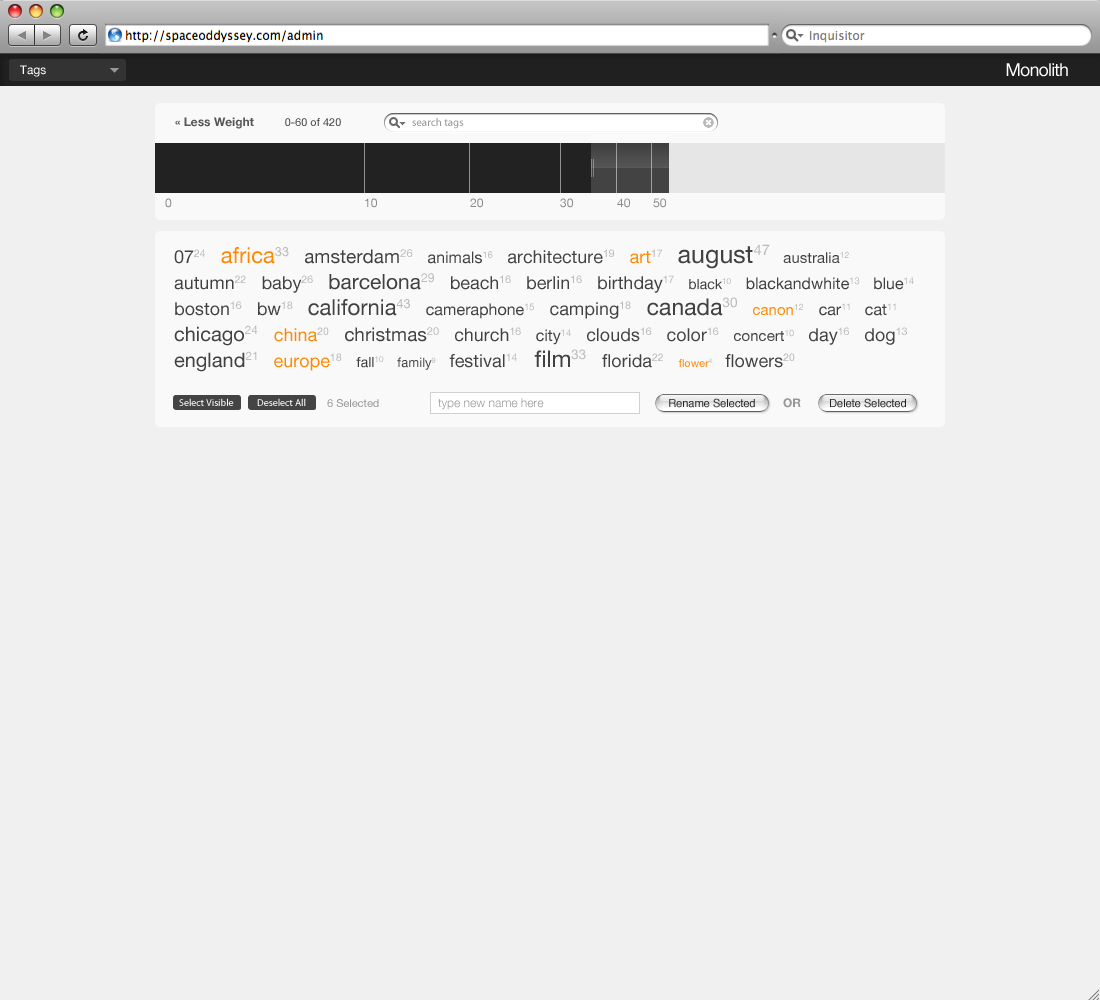
<style>
.page{position:relative;width:1100px;height:1000px;background:#f0f0f0}
.page>*{position:absolute;margin:0}
.t1{font:12px "HelveticaNeue";color:#ffffff}
.t2{font:18px "HelveticaNeue";letter-spacing:-0.05em;color:#ffffff}
.t3{font:12px "HelveticaNeue-Bold";color:#444444}
.t4{font:11px "HelveticaNeue";color:#444444}
.t5{font:11px "MyriadPro-Regular";color:#949494}
.t6{font:12px "HelveticaNeue";color:#898989}
.t7{font:16px/26px "HelveticaNeue";color:#414141}
.t8{font:18px/26px "HelveticaNeue";color:#414141}
.t9{font:18px/26px "HelveticaNeue";color:#bbbbbb}
.t10{font:22px/26px "HelveticaNeue";color:#ff8800}
.t11{font:22px/26px "HelveticaNeue";color:#bbbbbb}
.t12{font:19px/26px "HelveticaNeue";color:#414141}
.t13{font:19px/26px "HelveticaNeue";color:#bbbbbb}
.t14{font:16px/26px "HelveticaNeue";color:#bbbbbb}
.t15{font:18px/26px "HelveticaNeue";color:#ff8800}
.t16{font:25px/26px "HelveticaNeue";color:#414141}
.t17{font:25px/26px "HelveticaNeue";color:#bbbbbb}
.t18{font:15px/26px "HelveticaNeue";color:#414141}
.t19{font:15px/26px "HelveticaNeue";color:#bbbbbb}
.t20{font:21px/26px "HelveticaNeue";color:#414141}
.t21{font:21px/26px "HelveticaNeue";color:#bbbbbb}
.t22{font:14px/26px "HelveticaNeue";color:#414141}
.t23{font:14px/26px "HelveticaNeue";color:#bbbbbb}
.t24{font:22px/26px "HelveticaNeue";color:#414141}
.t25{font:22px/26px "HelveticaNeue";color:#b8b8b8}
.t26{font:23px/26px "HelveticaNeue";color:#414141}
.t27{font:23px/26px "HelveticaNeue";color:#bbbbbb}
.t28{font:15px/26px "HelveticaNeue";color:#ff8800}
.t29{font:20px/26px "HelveticaNeue";color:#414141}
.t30{font:20px/26px "HelveticaNeue";color:#bbbbbb}
.t31{font:13px/26px "HelveticaNeue";color:#414141}
.t32{font:13px/26px "HelveticaNeue";color:#bbbbbb}
.t33{font:11px/26px "HelveticaNeue";color:#ff8800}
.t34{font:11px/26px "HelveticaNeue";color:#bbbbbb}
.t35{font:10px "MyriadPro-Regular";color:#ffffff}
.t36{font:11px "HelveticaNeue";color:#969696}
.t37{font:12px "HelveticaNeue-Light";color:#999999}
.t38{font:11px "Helvetica";color:#242424}
.t39{font:12px "HelveticaNeue-Bold";color:#969696}
</style>
<div class="page">
<p class="t1" style="left:20px;top:65px;width:26px;height:12px">Tags</p>
<p class="t2" style="left:1006px;top:63px;width:62px;height:14px">Monolith</p>
<p class="t3" style="left:175px;top:117px;width:79px;height:12px;opacity:0.9">« Less Weight</p>
<p class="t4" style="left:285px;top:118px;width:56px;height:8px">0-60 of 420</p>
<p class="t5" style="left:412px;top:118px;width:52px;height:11px">search tags</p>
<p class="t6" style="left:165px;top:198px;width:7px;height:10px">0</p>
<p class="t6" style="left:365px;top:198px;width:12px;height:10px">10</p>
<p class="t6" style="left:470px;top:198px;width:13px;height:10px">20</p>
<p class="t6" style="left:560px;top:198px;width:13px;height:10px">30</p>
<p class="t6" style="left:617px;top:198px;width:13px;height:10px">40</p>
<p class="t6" style="left:653px;top:198px;width:13px;height:10px">50</p>
<p class="t7" style="left:174px;top:244px;width:740px;height:128px"><span class="t8">07</span><span class="t9">24   </span><span class="t10">africa</span><span class="t11">33   </span><span class="t12">amsterdam</span><span class="t13">26   </span>animals<span class="t14">16 </span><span class="t8">  architecture</span><span class="t9">19   </span><span class="t15">art</span><span class="t9">17   </span><span class="t16">august</span><span class="t17">47   </span><span class="t18">australia</span><span class="t19">12</span><span class="t8">   autumn</span><span class="t9">22</span><span class="t8">   baby</span><span class="t9">26   </span><span class="t20">barcelona</span><span class="t21">29</span><span class="t8">   beach</span><span class="t9">16</span><span class="t8">   berlin</span><span class="t9">16</span><span class="t8">   birthday</span><span class="t9">17  </span><span class="t22"> black</span><span class="t23">10  </span> blackandwhite<span class="t14">13</span>   blue<span class="t14">14</span><span class="t8">   boston</span><span class="t9">16</span><span class="t8">   bw</span><span class="t9">18   </span><span class="t24">california</span><span class="t25">43   </span>cameraphone<span class="t14">15</span><span class="t8">   camping</span><span class="t9">18   </span><span class="t26">canada</span><span class="t27">30   </span><span class="t28">canon</span><span class="t19">12   </span>car<span class="t14">11</span>   cat<span class="t14">11   </span><span class="t29">chicago</span><span class="t30">24   </span><span class="t15">china</span><span class="t9">20  </span><span class="t12"> christmas</span><span class="t13">20</span><span class="t8">   church</span><span class="t9">16  </span> city<span class="t14">14</span><span class="t8">   clouds</span><span class="t9">16</span><span class="t8">   color</span><span class="t9">16   </span><span class="t18">concert</span><span class="t19">10 </span><span class="t8">  day</span><span class="t9">16</span><span class="t8">   dog</span><span class="t9">13   </span><span class="t29">england</span><span class="t30">21   </span><span class="t15">europe</span><span class="t9">18   </span><span class="t22">fall</span><span class="t23">10   </span><span class="t31">family</span><span class="t32">9 </span><span class="t8">  festival</span><span class="t9">14  </span><span class="t26"> film</span><span class="t27">33 </span><span class="t8">  florida</span><span class="t9">22   </span><span class="t33">flower</span><span class="t34">4 </span><span class="t8">  flowers</span><span class="t9">20</span></p>
<p class="t35" style="left:179px;top:398px;width:55px;height:8px">Select Visible</p>
<p class="t35" style="left:257px;top:398px;width:49px;height:8px">Deselect All</p>
<p class="t36" style="left:327px;top:399px;width:52px;height:8px">6 Selected</p>
<p class="t37" style="left:438px;top:398px;width:106px;height:12px">type new name here</p>
<p class="t38" style="left:669px;top:398px;width:86px;height:10px">Rename Selected</p>
<p class="t39" style="left:783px;top:398px;width:18px;height:10px">OR</p>
<p class="t38" style="left:830px;top:398px;width:76px;height:10px">Delete Selected</p>
</div>
